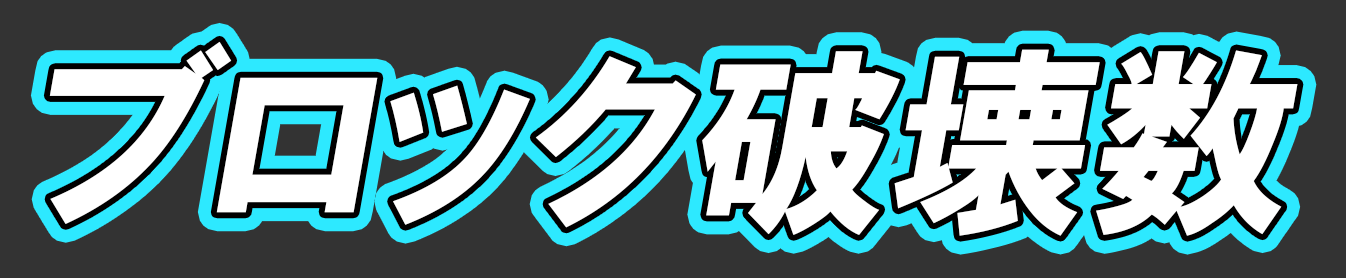
<style>
.page{position:relative;width:1346px;height:278px;background:#333333}
.page>*{position:absolute;margin:0}
.t1{font:200px "HGPSoeiKakugothicUB";color:#ffffff;font-style:italic}
</style>
<div class="page">
<p class="t1" style="left:49px;top:41px;width:1249px;height:195px">ブロック破壊数</p>
</div>
